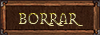
<style>
.page{position:relative;width:100px;height:35px}
.page>*{position:absolute;margin:0}
.t1{font:16.4px "Mason-Regular";scale:0.83 1}
</style>
<div class="page">
<p class="t1" style="left:19px;top:13px;width:64px;height:13px">BORRAR</p>
</div>
